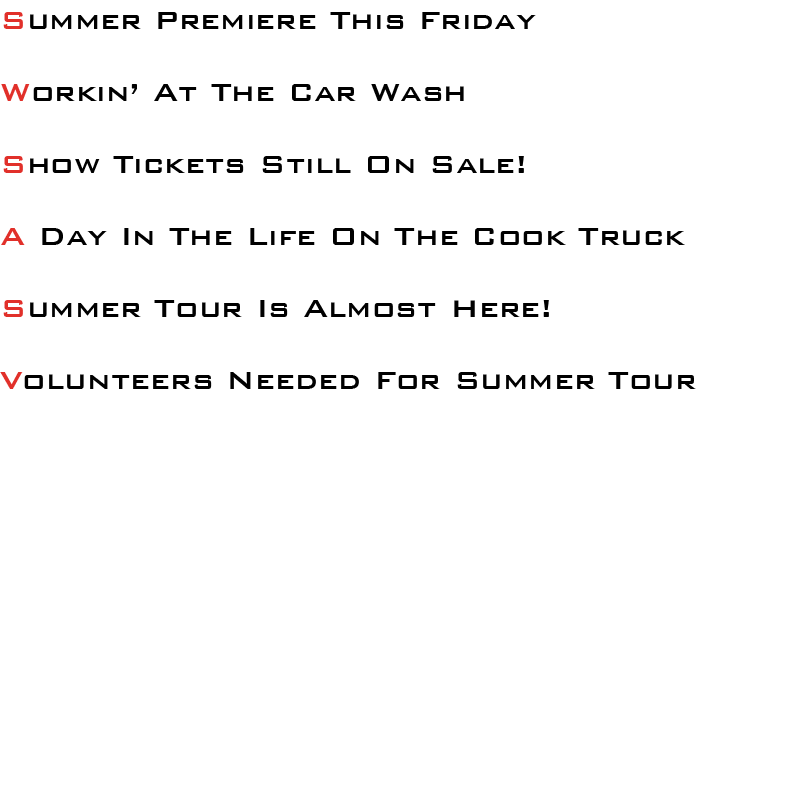
<style>
.page{position:relative;width:800px;height:800px;background:#ffffff}
.page>*{position:absolute;margin:0}
.t1{font:33px/36px "BankGothicBT-Medium";color:#000000}
.t2{font:33px/36px "BankGothicBT-Medium";color:#e1302a}
</style>
<div class="page">
<p class="t1" style="left:0px;top:12px;width:696px;height:377px"><span class="t2">S</span>ummer Premiere This Friday<br><br><span class="t2">W</span>orkin’ At The Car Wash<br><br><span class="t2">S</span>how Tickets Still On Sale!<br><br><span class="t2">A </span>Day In The Life On The Cook Truck<br><br><span class="t2">S</span>ummer Tour Is Almost Here!<br><br><span class="t2">V</span>olunteers Needed For Summer Tour</p>
</div>
